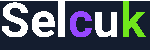
<style>
.page{position:relative;width:150px;height:50px;background:#141d2f}
.page>*{position:absolute;margin:0}
.t1{font:48px "Roboto-Bold";color:#ffffff}
.t2{font:48px "Roboto-Bold";color:#9747ff}
.t3{font:48px "Roboto-Bold";color:#70e61c}
</style>
<div class="page">
<p class="t1" style="left:2px;top:1px;width:144px;height:36px">Sel<span class="t2">c</span>u<span class="t3">k</span></p>
</div>
